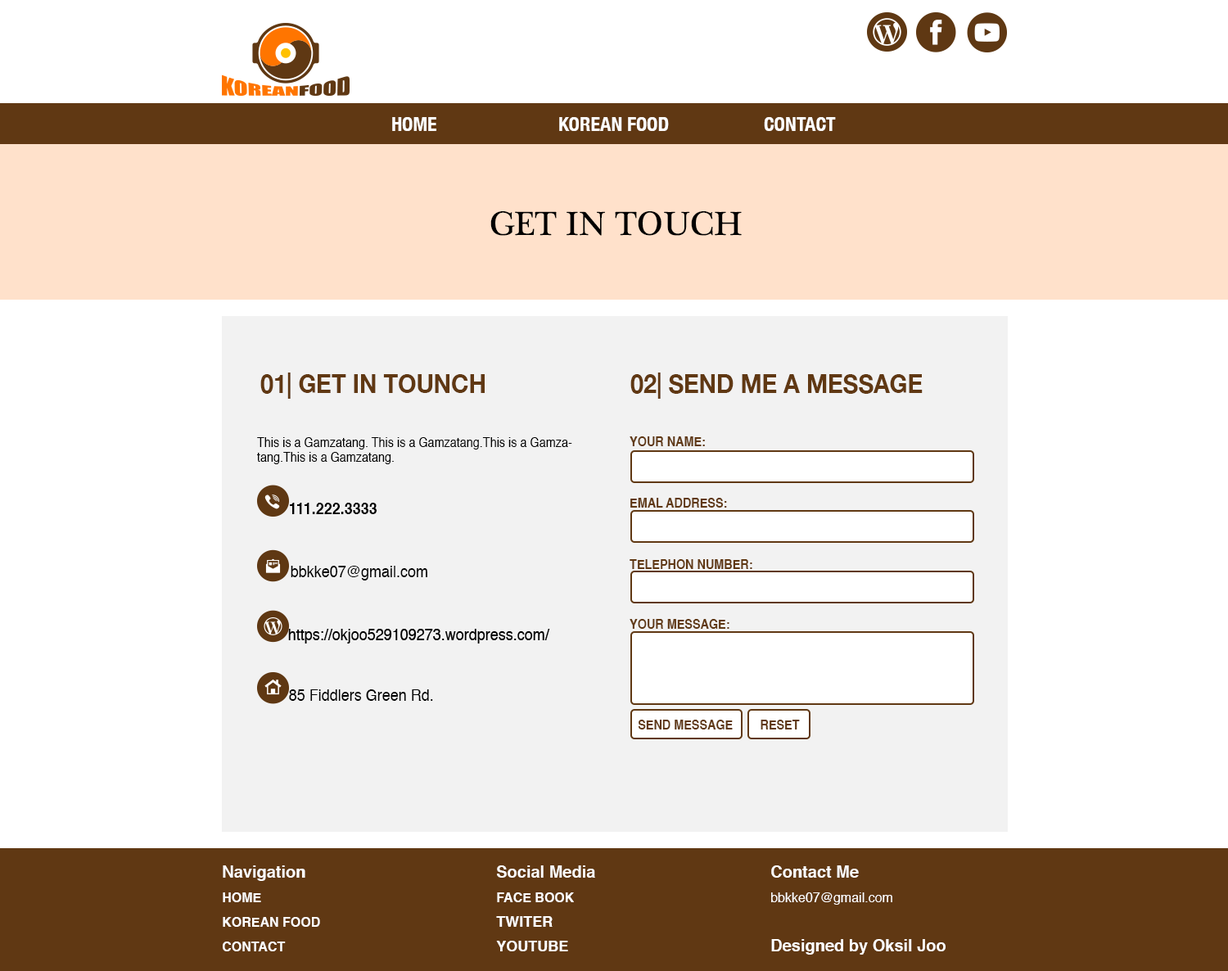
<style>
.page{position:relative;width:1228px;height:971px;background:#ffffff}
.page>*{position:absolute;margin:0}
.t1{font:19.6px "HelveticaNeue-CondensedBold";color:#ffffff}
.t2{font:34.4px "PlantagenetCherokee";color:#000000}
.t3{font:26.2px "HelveticaNeue-Bold";color:#603813;text-transform:uppercase;scale:0.9 1}
.t4{font:13.1px/14.7px "Helvetica";color:#000000;scale:0.9 1}
.t5{font:13.1px "Helvetica-Bold";color:#603813;text-transform:uppercase;scale:0.9 1}
.t6{font:16.4px "Helvetica-Bold";color:#000000;scale:0.9 1}
.t7{font:16.4px "Helvetica";color:#000000;scale:0.9 1}
.t8{font:13.1px/24.6px "Helvetica-Bold";color:#ffffff}
.t9{font:16.4px/24.6px "Helvetica-Bold";color:#ffffff}
.t10{font:14.7px/24.6px "Helvetica-Bold";color:#ffffff}
.t11{font:13.1px/24.6px "Helvetica";color:#ffffff}
</style>
<div class="page">
<p class="t1" style="left:392px;top:117px;width:44px;height:14px">HOME</p>
<p class="t1" style="left:559px;top:117px;width:110px;height:14px">KOREAN FOOD</p>
<p class="t1" style="left:764px;top:117px;width:72px;height:14px">CONTACT</p>
<p class="t2" style="left:490px;top:211px;width:252px;height:25px">GET IN TOUCH</p>
<p class="t3" style="left:260px;top:373px;width:225px;height:26px">01| Get In Tounch</p>
<p class="t3" style="left:630px;top:373px;width:293px;height:26px">02| send me a message</p>
<p class="t4" style="left:257px;top:437px;width:315px;height:27px">This is a Gamzatang. This is a Gamzatang.This is a Gamzatang.This is a Gamzatang.</p>
<p class="t5" style="left:630px;top:436px;width:75px;height:10px">Your name:</p>
<p class="t5" style="left:630px;top:498px;width:97px;height:10px">Emal address:</p>
<p class="t6" style="left:290px;top:503px;width:87px;height:11px">111.222.3333</p>
<p class="t7" style="left:291px;top:566px;width:136px;height:14px">bbkke07@gmail.com</p>
<p class="t5" style="left:630px;top:559px;width:122px;height:10px">TELEPHON Number:</p>
<p class="t7" style="left:288px;top:629px;width:262px;height:15px">https://okjoo529109273.wordpress.com/</p>
<p class="t5" style="left:630px;top:619px;width:99px;height:10px">Your message:</p>
<p class="t7" style="left:289px;top:689px;width:144px;height:12px">85 Fiddlers Green Rd.</p>
<p class="t5" style="left:638px;top:720px;width:95px;height:9px">SEND MESSAGE</p>
<p class="t5" style="left:761px;top:720px;width:39px;height:9px">RESET</p>
<p class="t8" style="left:223px;top:865px;width:97px;height:86px"><span class="t9">Navigation<br></span>HOME                       <br>KOREAN FOOD        <br>CONTACT</p>
<p class="t10" style="left:496px;top:865px;width:99px;height:86px"><span class="t9">Social Media<br></span><span class="t8">FACE BOOK<br></span>TWITER<br>YOUTUBE</p>
<p class="t9" style="left:771px;top:865px;width:175px;height:90px">Contact Me<br><span class="t11">bbkke07@gmail.com<br><br></span>Designed by Oksil Joo</p>
</div>
